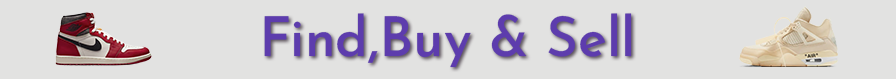
<style>
.page{position:relative;width:896px;height:79px;background:#e2e2e1}
.page>*{position:absolute;margin:0}
.t1{font:54.7px "JosefinSansRoman-Medium";color:#5d3cad}
</style>
<div class="page">
<p class="t1" style="left:264px;top:13px;width:368px;height:55px">Find,Buy &amp; Sell</p>
</div>
